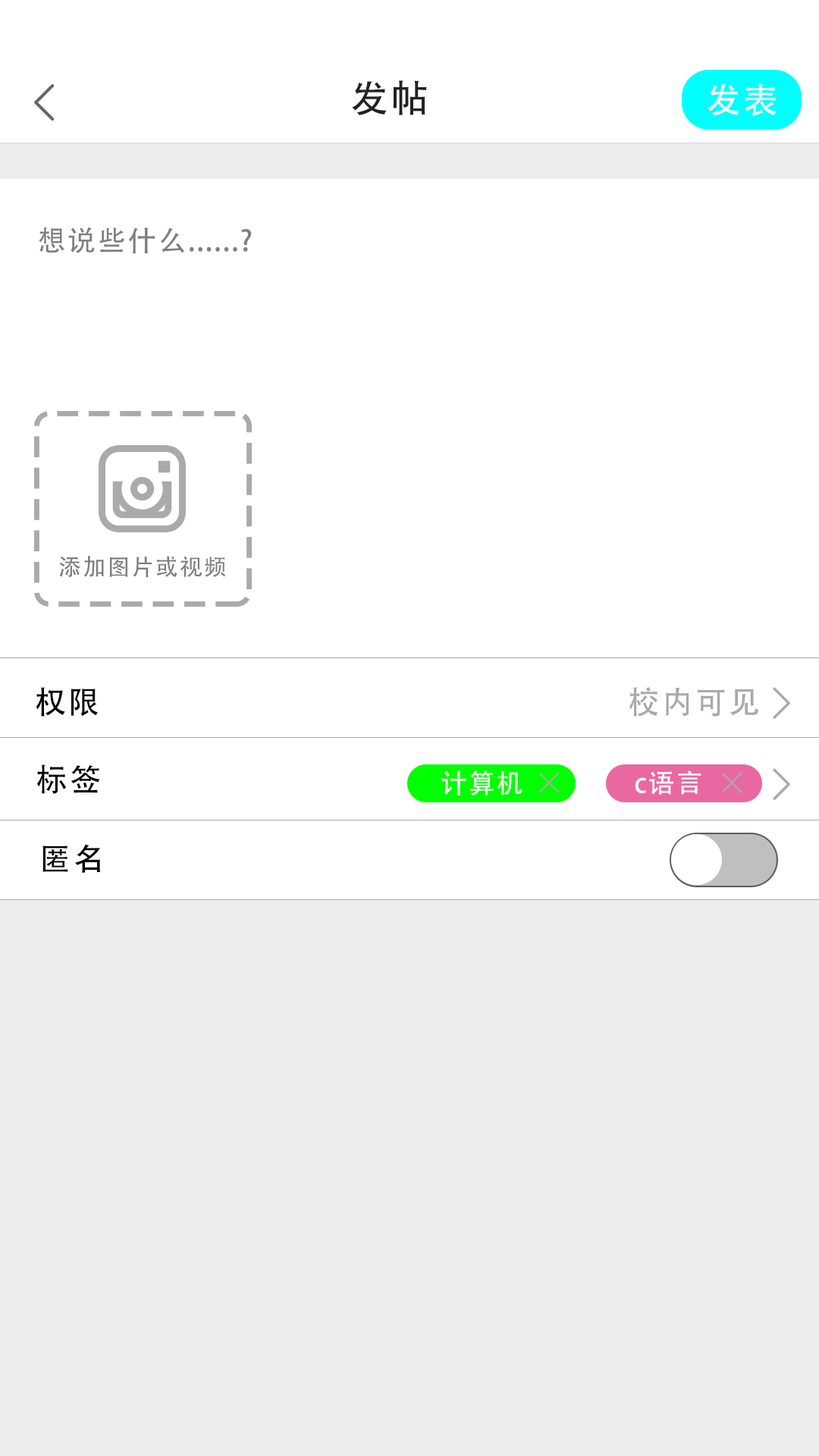
<style>
.page{position:relative;width:819px;height:1456px;background:#ffffff}
.page>*{position:absolute;margin:0}
.t1{font:37.9px "AdobeHeitiStd-Regular";letter-spacing:0.06em;color:#222222}
.t2{font:34.8px "AdobeHeitiStd-Regular";letter-spacing:0.06em;color:#fbf9f9}
.t3{font:28.4px "AdobeHeitiStd-Regular";letter-spacing:0.06em;color:#807f7f}
.t4{font:22.8px "AdobeHeitiStd-Regular";letter-spacing:0.06em;color:#807f7f}
.t5{font:31.6px "AdobeHeitiStd-Regular";letter-spacing:0.06em;color:#050505}
.t6{font:31.6px "AdobeHeitiStd-Regular";letter-spacing:0.06em;color:#aaaaaa}
.t7{font:31.6px "AdobeHeitiStd-Regular";letter-spacing:0.06em;color:#020202}
.t8{font:26.4px "AdobeHeitiStd-Regular";letter-spacing:0.06em;color:#fdfbfb}
.t9{font:31.6px "AdobeHeitiStd-Regular";letter-spacing:0.06em;color:#030303}
</style>
<div class="page">
<p class="t1" style="left:352px;top:80px;width:75px;height:35px">发帖</p>
<p class="t2" style="left:708px;top:83px;width:69px;height:34px">发表</p>
<p class="t3" style="left:39px;top:227px;width:213px;height:27px">想说些什么......?</p>
<p class="t4" style="left:59px;top:556px;width:167px;height:22px">添加图片或视频</p>
<p class="t5" style="left:36px;top:687px;width:62px;height:30px">权限</p>
<p class="t6" style="left:629px;top:687px;width:130px;height:30px">校内可见</p>
<p class="t7" style="left:36px;top:764px;width:64px;height:30px">标签</p>
<p class="t8" style="left:441px;top:770px;width:81px;height:25px">计算机</p>
<p class="t8" style="left:635px;top:770px;width:66px;height:25px">c语言</p>
<p class="t9" style="left:42px;top:844px;width:58px;height:29px">匿名</p>
</div>
